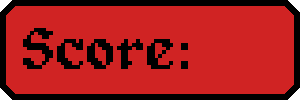
<style>
.page{position:relative;width:300px;height:100px;background:#d02323}
.page>*{position:absolute;margin:0}
.t1{font:60px "Alagard";color:#000000}
</style>
<div class="page">
<p class="t1" style="left:23px;top:28px;width:165px;height:41px">Score:</p>
</div>
